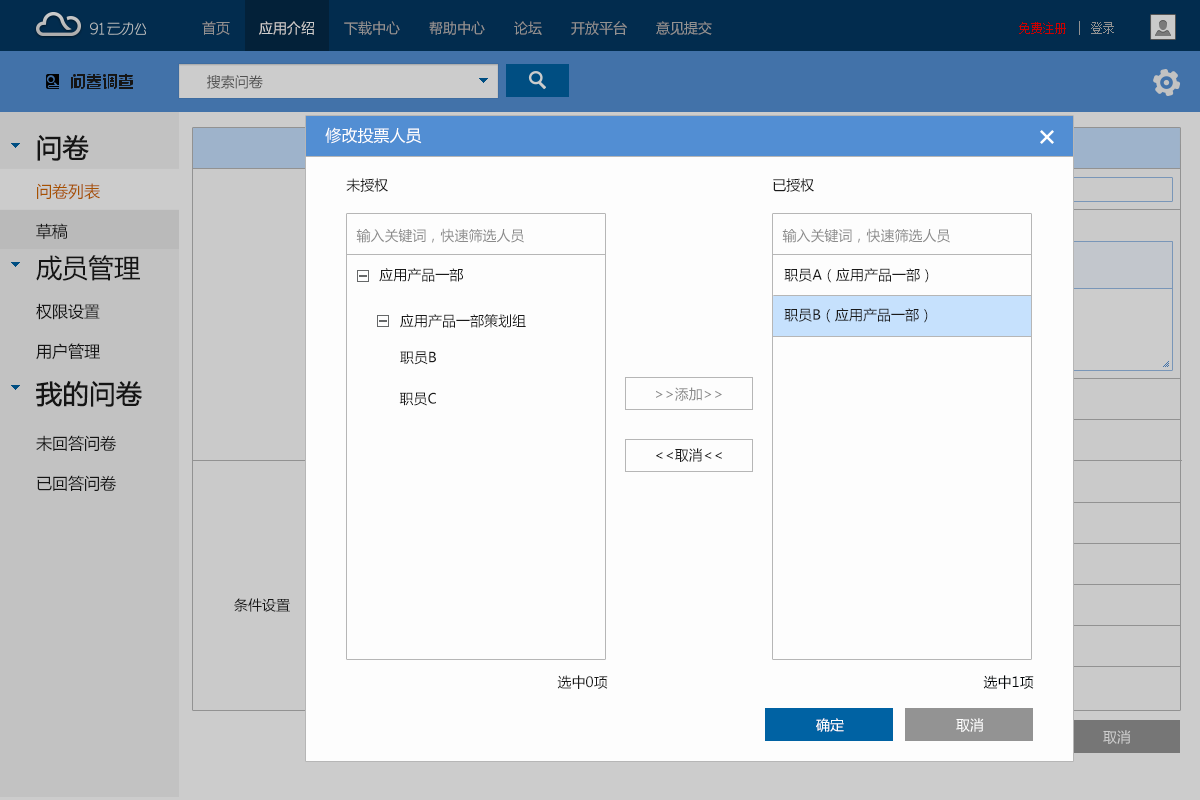
<style>
.page{position:relative;width:1200px;height:800px;background:#fdfdfd}
.page>*{position:absolute;margin:0}
.t1{font:14px "MicrosoftYaHei";color:#929292}
.t2{font:12px "SimSun"}
.t3{font:14px "MicrosoftYaHei";color:#404040}
.t4{font:16px/40px "MicrosoftYaHei";color:#1a1a1a}
.t5{font:26px/40px "MicrosoftYaHei";color:#1a1a1a;font-weight:bold}
.t6{font:16px/40px "MicrosoftYaHei";color:#d16700}
.t7{font:26px/40px "MicrosoftYaHei";color:#1a1a1a}
.t8{font:26px/46px "MicrosoftYaHei";color:#1a1a1a;font-weight:bold}
.t9{font:16px/46px "MicrosoftYaHei";color:#1a1a1a}
.t10{font:16px "MicrosoftYaHei";color:#ffffff}
.t11{font:14px "MicrosoftYaHei";color:#1a1a1a}
.t12{font:14px "MicrosoftYaHei";color:#8b8b8b}
.t13{font:14px/46px "MicrosoftYaHei";color:#1a1a1a}
.t14{font:14px "MicrosoftYaHei";color:#000407}
.t15{font:14px "MicrosoftYaHei";color:#ffffff}
.t16{font:14px "MicrosoftYaHei";color:#cccccc}
</style>
<div class="page">
<p class="t1" style="left:202px;top:21px;width:510px;height:14px">首页       应用介绍       下载中心       帮助中心       论坛       开放平台       意见提交</p>
<p class="t2" style="left:1019px;top:22px;width:95px;height:12px">免费注册    登录</p>
<p class="t3" style="left:207px;top:75px;width:56px;height:14px">搜索问卷</p>
<p class="t4" style="left:36px;top:135px;width:106px;height:356px"><span class="t5">问卷<br></span><span class="t6">问卷列表<br></span>草稿<br><span class="t7">成员管理<br></span>权限设置<br>用户管理<br><span class="t8">我的问卷<br></span><span class="t9">未回答问卷<br></span>已回答问卷</p>
<p class="t10" style="left:325px;top:127px;width:97px;height:17px">修改投票人员</p>
<p class="t11" style="left:346px;top:178px;width:42px;height:14px">未授权</p>
<p class="t11" style="left:773px;top:178px;width:41px;height:14px">已授权</p>
<p class="t12" style="left:356px;top:228px;width:168px;height:15px">输入关键词，快速筛选人员</p>
<p class="t12" style="left:782px;top:228px;width:168px;height:15px">输入关键词，快速筛选人员</p>
<p class="t13" style="left:379px;top:268px;width:147px;height:60px">应用产品一部<br>     应用产品一部策划组</p>
<p class="t11" style="left:784px;top:268px;width:145px;height:15px">职员A（应用产品一部）</p>
<p class="t11" style="left:784px;top:308px;width:144px;height:15px">职员B（应用产品一部）</p>
<p class="t11" style="left:400px;top:351px;width:36px;height:14px">职员B</p>
<p class="t12" style="left:656px;top:387px;width:66px;height:14px">&gt;&gt;添加&gt;&gt;</p>
<p class="t11" style="left:399px;top:392px;width:37px;height:14px">职员C</p>
<p class="t11" style="left:656px;top:448px;width:66px;height:14px">&lt;&lt;取消&lt;&lt;</p>
<p class="t11" style="left:234px;top:598px;width:56px;height:14px">条件设置</p>
<p class="t11" style="left:557px;top:675px;width:51px;height:14px">选中0项</p>
<p class="t14" style="left:983px;top:675px;width:51px;height:14px">选中1项</p>
<p class="t15" style="left:816px;top:718px;width:28px;height:14px">确定</p>
<p class="t15" style="left:956px;top:718px;width:28px;height:14px">取消</p>
<p class="t16" style="left:1103px;top:730px;width:28px;height:14px">取消</p>
</div>
